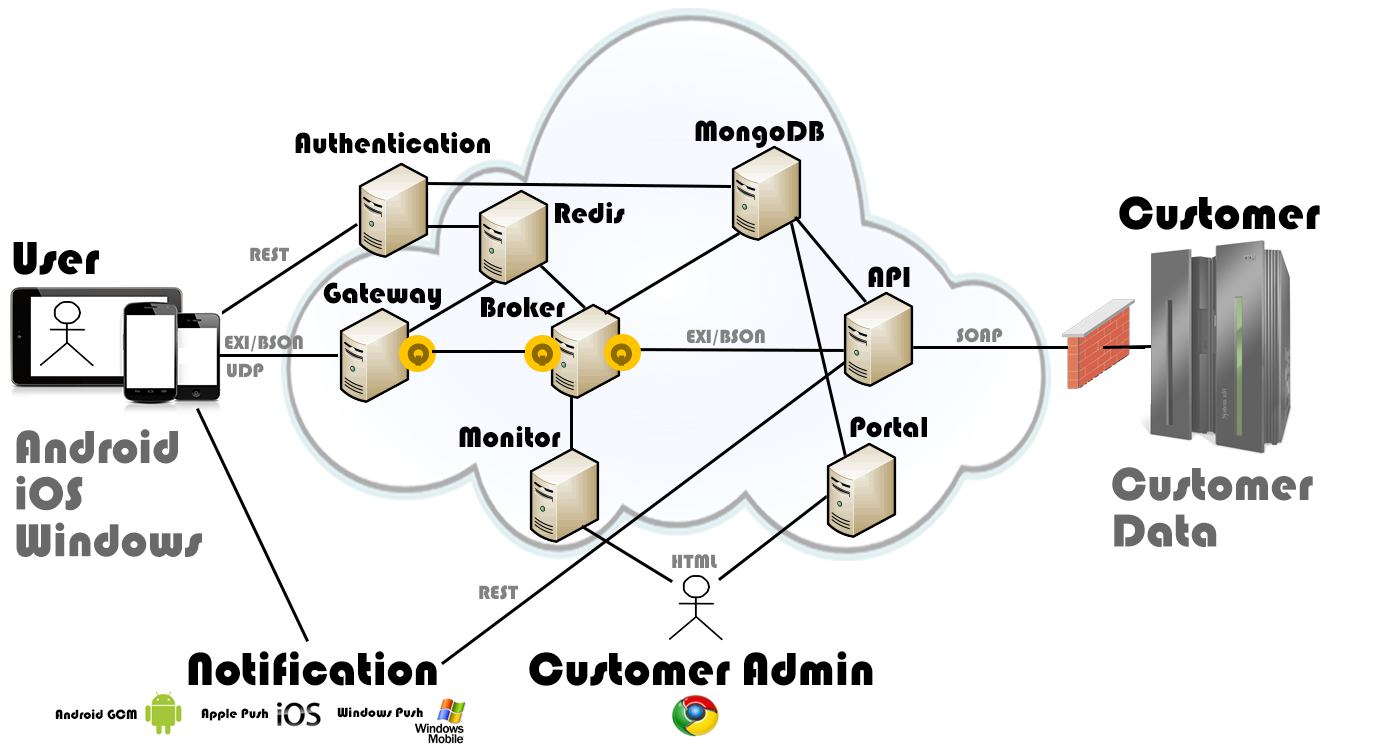
<style>
.page{position:relative;width:1400px;height:751px;background:#ffffff}
.page>*{position:absolute;margin:0}
.t1{font:30px "Bauhaus93";color:#000000}
.t2{font:48px "Bauhaus93";color:#000000}
.t3{font:20px "Bauhaus93";color:#828282}
.t4{font:30px "Bauhaus93";color:#8a6a00}
.t5{font:30px "Bauhaus93";color:#8d6c00}
.t6{font:48px/46.6px "Bauhaus93";color:#696969}
.t7{font:14px "Bauhaus93";color:#000000}
</style>
<div class="page">
<p class="t1" style="left:695px;top:120px;width:129px;height:28px">MongoDB</p>
<p class="t1" style="left:295px;top:132px;width:195px;height:22px">Authentication</p>
<p class="t2" style="left:1119px;top:196px;width:201px;height:34px">Customer</p>
<p class="t1" style="left:555px;top:202px;width:70px;height:22px">Redis</p>
<p class="t2" style="left:13px;top:242px;width:86px;height:33px">User</p>
<p class="t3" style="left:250px;top:247px;width:39px;height:15px">REST</p>
<p class="t1" style="left:868px;top:266px;width:42px;height:21px">API</p>
<p class="t1" style="left:323px;top:282px;width:118px;height:28px">Gateway</p>
<p class="t1" style="left:481px;top:297px;width:84px;height:21px">Broker</p>
<p class="t3" style="left:687px;top:329px;width:78px;height:17px">EXI/BSON</p>
<p class="t3" style="left:956px;top:328px;width:47px;height:15px">SOAP</p>
<p class="t3" style="left:225px;top:335px;width:78px;height:17px">EXI/BSON</p>
<p class="t4" style="left:407px;top:343px;width:22px;height:23px">Q</p>
<p class="t4" style="left:531px;top:343px;width:22px;height:23px">Q</p>
<p class="t5" style="left:610px;top:343px;width:22px;height:23px">Q</p>
<p class="t3" style="left:227px;top:363px;width:37px;height:15px">UDP</p>
<p class="t1" style="left:850px;top:416px;width:77px;height:22px">Portal</p>
<p class="t6" style="left:16px;top:429px;width:186px;height:128px">Android<br>iOS<br>Windows</p>
<p class="t1" style="left:459px;top:426px;width:102px;height:22px">Monitor</p>
<p class="t6" style="left:1112px;top:467px;width:201px;height:80px">Customer<br>Data</p>
<p class="t3" style="left:672px;top:554px;width:45px;height:14px">HTML</p>
<p class="t3" style="left:479px;top:585px;width:39px;height:15px">REST</p>
<p class="t2" style="left:188px;top:651px;width:249px;height:35px">Notification</p>
<p class="t2" style="left:529px;top:651px;width:344px;height:35px">Customer Admin</p>
<p class="t7" style="left:55px;top:709px;width:82px;height:11px">Android GCM</p>
<p class="t7" style="left:201px;top:708px;width:67px;height:13px">Apple Push</p>
<p class="t7" style="left:337px;top:707px;width:86px;height:11px">Windows Push</p>
</div>
